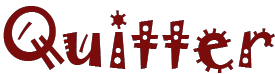
<style>
.page{position:relative;width:275px;height:74px;background:#ffffff}
.page>*{position:absolute;margin:0}
.t1{font:75px "Jokerman-Regular";color:#7b0c0c}
</style>
<div class="page">
<p class="t1" style="left:3px;top:6px;width:272px;height:67px">Quitter</p>
<p class="t1" style="left:3px;top:6px;width:272px;height:67px">Quitter</p>
</div>
